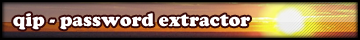
<style>
.page{position:relative;width:360px;height:40px}
.page>*{position:absolute;margin:0}
.t1{font:19px "CooperBlack";color:#ffffff}
</style>
<div class="page">
<p class="t1" style="left:13px;top:13px;width:237px;height:17px">qip - password extractor</p>
</div>
